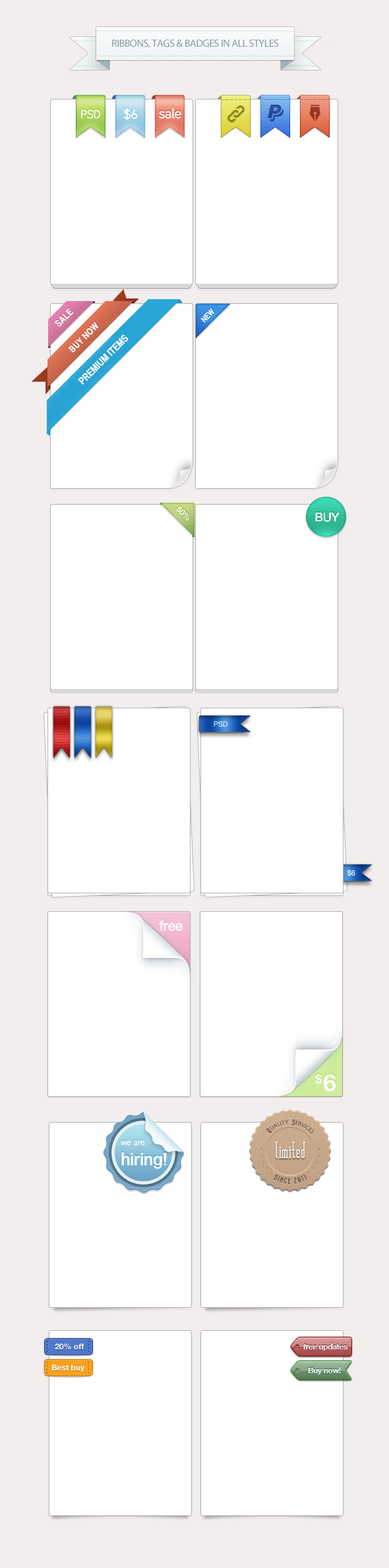
<style>
.page{position:relative;width:389px;height:1568px;background:#ffffff}
.page>*{position:absolute;margin:0}
.t1{font:10.5px "MyriadPro-Regular";letter-spacing:-0.03em;color:#87999f;text-transform:uppercase}
.t2{font:11.9px "Bariol-Regular";letter-spacing:-0.01em;color:#ffffff}
.t3{font:15.8px "BPscript";letter-spacing:-0.01em;color:#ffffff}
.t4{font:14.5px "Bariol-Regular";letter-spacing:-0.01em;color:#ffffff}
.t5{font:9.2px "HelveticaCYBold";letter-spacing:0.02em;color:#ffffff}
.t6{font:7.9px "HelveticaCYBold";letter-spacing:-0.01em;color:#ffffff}
.t7{font:7.9px "HelveticaNeue-Medium";letter-spacing:-0.01em;color:#ffffff}
.t8{font:11.9px "HelveticaNeue";letter-spacing:-0.01em;color:#ffffff}
.t9{font:7.2px "HelveticaNeue";color:#d2e2f5}
.t10{font:7.2px "HelveticaNeue";color:#ffffff}
.t11{font:14px "HelveticaNeue";letter-spacing:-0.01em;color:#ffffff}
.t12{font:11.9px "HelveticaNeue-Bold";letter-spacing:-0.01em;color:#ffffff}
.t13{font:23.7px "HelveticaNeue-Bold";letter-spacing:-0.01em;color:#ffffff}
.t14{font:5.9px "MyriadPro-Regular";color:#6c5742;text-transform:uppercase}
.t15{font:5.9px "Bazar";color:#6c5742;text-transform:uppercase}
.t16{font:15.8px/19.8px "Geneva";letter-spacing:-0.025em;color:#ffffff;font-weight:bold}
.t17{font:7.9px/19.8px "Geneva";letter-spacing:-0.025em;color:#ffffff}
.t18{font:21.4px "MatchbookSerif";color:#ffffff}
.t19{font:5.9px "Bazar";letter-spacing:0.18em;color:#6a5746;text-transform:uppercase}
.t20{font:9.2px "MyriadPro-Regular";letter-spacing:0.18em;color:#6a5746;text-transform:uppercase}
.t21{font:6.6px "MyriadPro-Regular";letter-spacing:0.18em;color:#6a5746;text-transform:uppercase}
.t22{font:7.9px "HelveticaNeue-Bold";color:#ffffff}
.t23{font:7.8px "HelveticaNeue-Bold";letter-spacing:-0.025em;color:#eafbff}
</style>
<div class="page">
<p class="t1" style="left:112px;top:40px;width:167px;height:8px">Ribbons, tags &amp; Badges in all styles</p>
<p class="t2" style="left:81px;top:109px;width:19px;height:10px">PSD</p>
<p class="t2" style="left:81px;top:109px;width:19px;height:10px">PSD</p>
<p class="t3" style="left:123px;top:108px;width:14px;height:12px">$6</p>
<p class="t3" style="left:123px;top:108px;width:14px;height:12px">$6</p>
<p class="t4" style="left:159px;top:107px;width:22px;height:12px">sale</p>
<p class="t4" style="left:159px;top:107px;width:22px;height:12px">sale</p>
<p class="t5" style="left:55px;top:308px;width:19px;height:19px;rotate:-45deg">SALE</p>
<p class="t6" style="left:200px;top:308px;width:14px;height:15px;rotate:-46deg"><span class="t7"><br></span> NEW</p>
<p class="t5" style="left:68px;top:322px;width:31px;height:31px;rotate:-45deg">BUY NOW</p>
<p class="t7" style="left:176px;top:506px;width:14px;height:14px;rotate:44deg">50%</p>
<p class="t8" style="left:315px;top:513px;width:24px;height:9px">BUY</p>
<p class="t8" style="left:315px;top:513px;width:24px;height:9px">BUY</p>
<p class="t9" style="left:213px;top:721px;width:15px;height:6px">PSD</p>
<p class="t10" style="left:347px;top:870px;width:8px;height:6px;opacity:0.89">$6</p>
<p class="t11" style="left:159px;top:920px;width:23px;height:11px">free</p>
<p class="t12" style="left:315px;top:1073px;width:7px;height:11px">$</p>
<p class="t13" style="left:323px;top:1074px;width:13px;height:18px">6</p>
<p class="t13" style="left:323px;top:1075px;width:13px;height:18px">6</p>
<p class="t14" style="left:266px;top:1119px;width:48px;height:15px;text-align:center"><span class="t15">Q</span>uality<span class="t15">  S</span>ervices</p>
<p class="t16" style="left:121px;top:1140px;width:46px;height:29px"><span class="t17">we are<br></span>hiring!</p>
<p class="t16" style="left:121px;top:1140px;width:46px;height:29px"><span class="t17">we are<br></span>hiring!</p>
<p class="t18" style="left:275px;top:1142px;width:30px;height:16px">limited</p>
<p class="t18" style="left:275px;top:1142px;width:30px;height:16px">limited</p>
<p class="t19" style="left:260px;top:1148px;width:60px;height:36px;text-align:center"><span class="t20">· · · · </span><span class="t21">· </span>SINCE 2011 <span class="t20">· · · · ·</span></p>
<p class="t22" style="left:55px;top:1343px;width:29px;height:7px">20% off</p>
<p class="t23" style="left:302px;top:1343px;width:46px;height:8px">free updates</p>
<p class="t22" style="left:52px;top:1364px;width:33px;height:8px">Best buy</p>
<p class="t23" style="left:308px;top:1367px;width:33px;height:7px">Buy now!</p>
</div>
